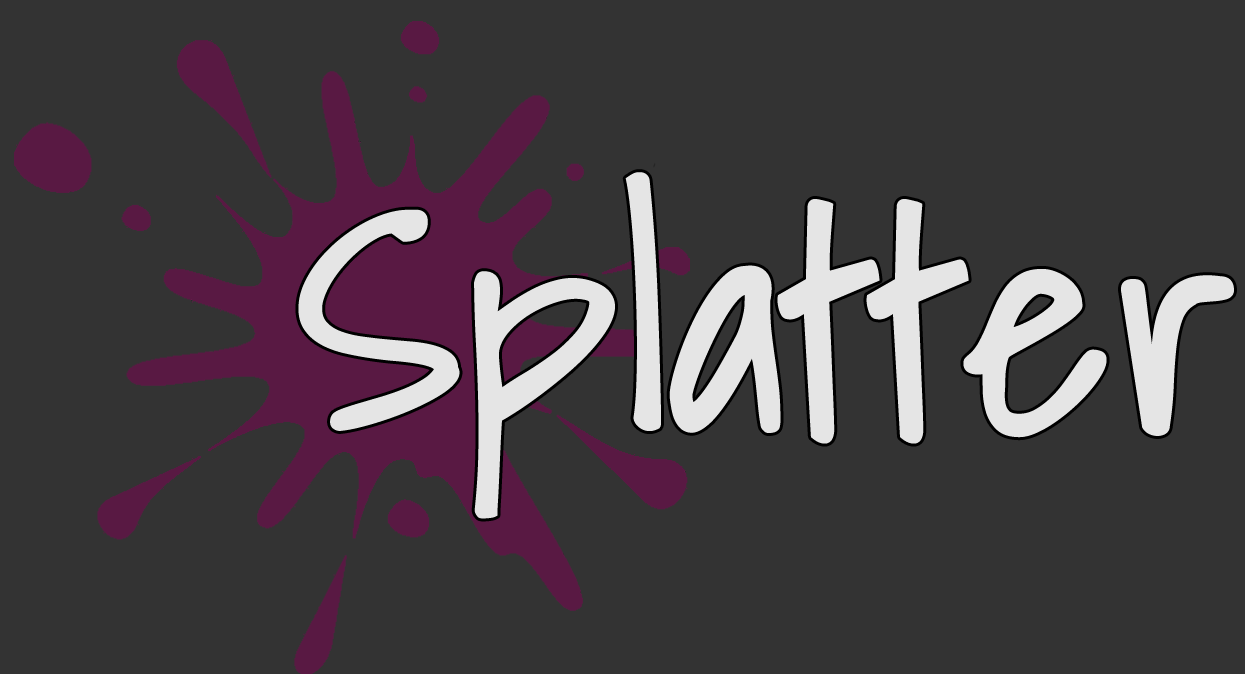
<style>
.page{position:relative;width:1245px;height:674px;background:#333333}
.page>*{position:absolute;margin:0}
.t1{font:301.3px "ShadowsIntoLight";color:#e5e5e5;font-weight:bold}
</style>
<div class="page">
<p class="t1" style="left:298px;top:172px;width:936px;height:347px">Splatter</p>
</div>
